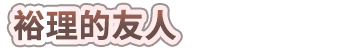
<style>
.page{position:relative;width:360px;height:50px;background:#ffffff}
.page>*{position:absolute;margin:0}
.t1{font:32px "SourceHanSansSC-Bold";font-weight:bold}
</style>
<div class="page">
<p class="t1" style="left:13px;top:9px;width:163px;height:32px">裕理的友人</p>
</div>
